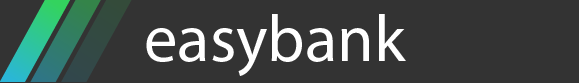
<style>
.page{position:relative;width:579px;height:83px;background:#333333}
.page>*{position:absolute;margin:0}
.t1{font:66.7px "MyriadPro-Regular";color:#ffffff}
</style>
<div class="page">
<p class="t1" style="left:146px;top:14px;width:260px;height:62px">easybank</p>
</div>
